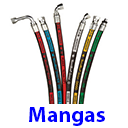
<style>
.page{position:relative;width:128px;height:128px;background:#ffffff}
.page>*{position:absolute;margin:0}
.t1{font:22px "MyriadPro-Bold";color:#0000ff}
</style>
<div class="page">
<p class="t1" style="left:29px;top:107px;width:76px;height:19px">Mangas</p>
</div>
